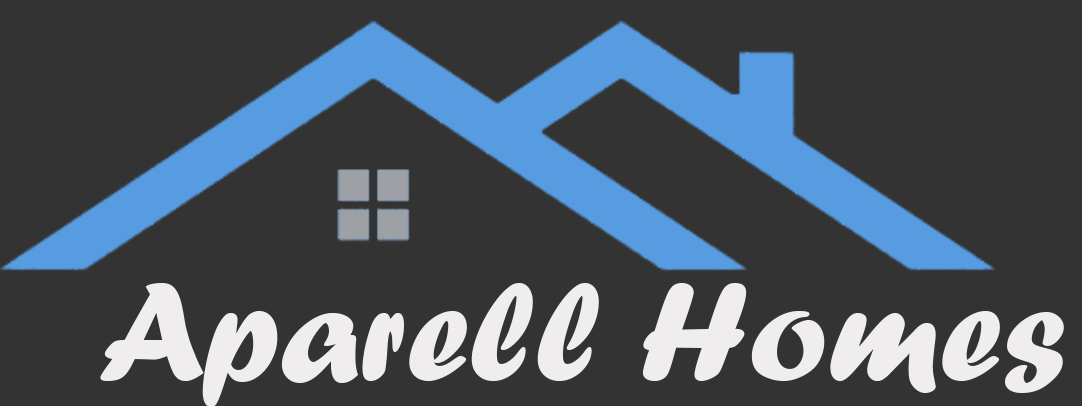
<style>
.page{position:relative;width:1082px;height:406px;background:#333333}
.page>*{position:absolute;margin:0}
.t1{font:145px "ForteMT";color:#efeded}
</style>
<div class="page">
<p class="t1" style="left:100px;top:283px;width:964px;height:124px">Aparell Homes</p>
</div>
